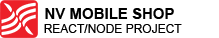
<style>
.page{position:relative;width:219px;height:38px;background:#ffffff}
.page>*{position:absolute;margin:0}
.t1{font:15px "Arial-BoldMT";color:#000000}
.t2{font:12px "ArialMT";color:#000000}
</style>
<div class="page">
<p class="t1" style="left:45px;top:8px;width:129px;height:11px">NV MOBILE SHOP</p>
<p class="t2" style="left:44px;top:24px;width:138px;height:9px">REACT/NODE PROJECT</p>
</div>
